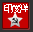
<style>
.page{position:relative;width:33px;height:32px;background:#c50000}
.page>*{position:absolute;margin:0}
.t1{font:10.4px "SimSun";letter-spacing:-0.25em;color:#ffffff}
</style>
<div class="page">
<p class="t1" style="left:4px;top:4px;width:24px;height:9px">印度洋</p>
</div>
